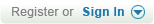
<style>
.page{position:relative;width:154px;height:24px}
.page>*{position:absolute;margin:0}
.t1{font:12px "ArialMT";letter-spacing:0.04em;color:#838383}
.t2{font:12px "Arial-BoldMT";letter-spacing:0.04em;color:#1d78ad}
</style>
<div class="page">
<p class="t1" style="left:12px;top:7px;width:62px;height:11px">Register or</p>
<p class="t2" style="left:82px;top:7px;width:42px;height:11px">Sign In</p>
</div>
